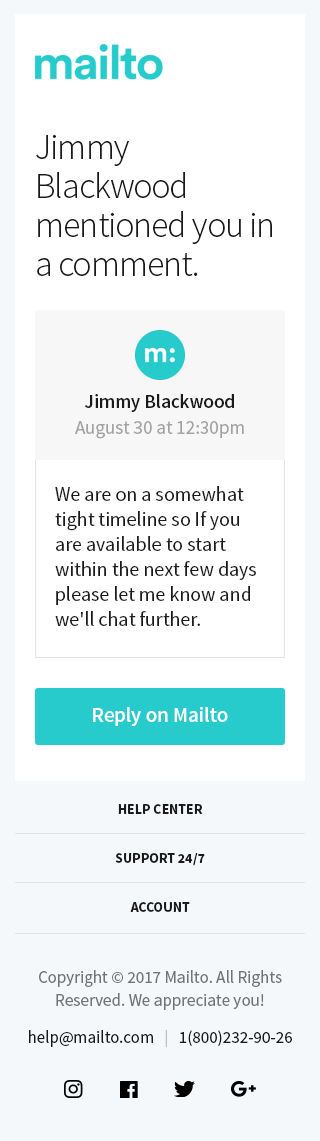
<style>
.page{position:relative;width:320px;height:1141px;background:#ffffff}
.page>*{position:absolute;margin:0}
.t1{font:36px/39px "SourceSansPro-Light";letter-spacing:-0.03em;color:#1a1a1a}
.t2{font:19px "SourceSansPro-Semibold";color:#1a1a1a}
.t3{font:19px "SourceSansPro-Regular";color:#a2a2a2}
.t4{font:20px/25px "SourceSansPro-Regular";color:#1a1a1a}
.t5{font:21px "SourceSansPro-Semibold";letter-spacing:-0.009em;color:#ffffff}
.t6{font:14px/49px "SourceSansPro-Bold";color:#1a1a1a}
.t7{font:17px/23px "SourceSansPro-Regular";color:#727374}
.t8{font:17px/23px "SourceSansPro-Regular";color:#1a1a1a}
.t9{font:17px/23px "SourceSansPro-Regular";color:#bebebe}
</style>
<div class="page">
<p class="t1" style="left:36px;top:134px;width:236px;height:142px">Jimmy Blackwood mentioned you in a comment.</p>
<p class="t2" style="left:84px;top:394px;width:150px;height:18px">Jimmy Blackwood</p>
<p class="t3" style="left:75px;top:421px;width:169px;height:18px">August 30 at 12:30pm</p>
<p class="t4" style="left:55px;top:486px;width:201px;height:140px">We are on a somewhat tight timeline so If you are available to start within the next few days please let me know and we'll chat further.</p>
<p class="t5" style="left:93px;top:707px;width:135px;height:19px">Reply on Mailto</p>
<p class="t6" style="left:115px;top:804px;width:90px;height:108px;text-align:center">HELP CENTER<br>SUPPORT 24/7<br>ACCOUNT</p>
<p class="t7" style="left:29px;top:970px;width:263px;height:78px;text-align:center">Copyright © 2017 Mailto. All Rights Reserved. We appreciate you!<br><span class="t8">help@mailto.com   </span><span class="t9">|   </span><span class="t8">1(800)232-90-26</span></p>
</div>
